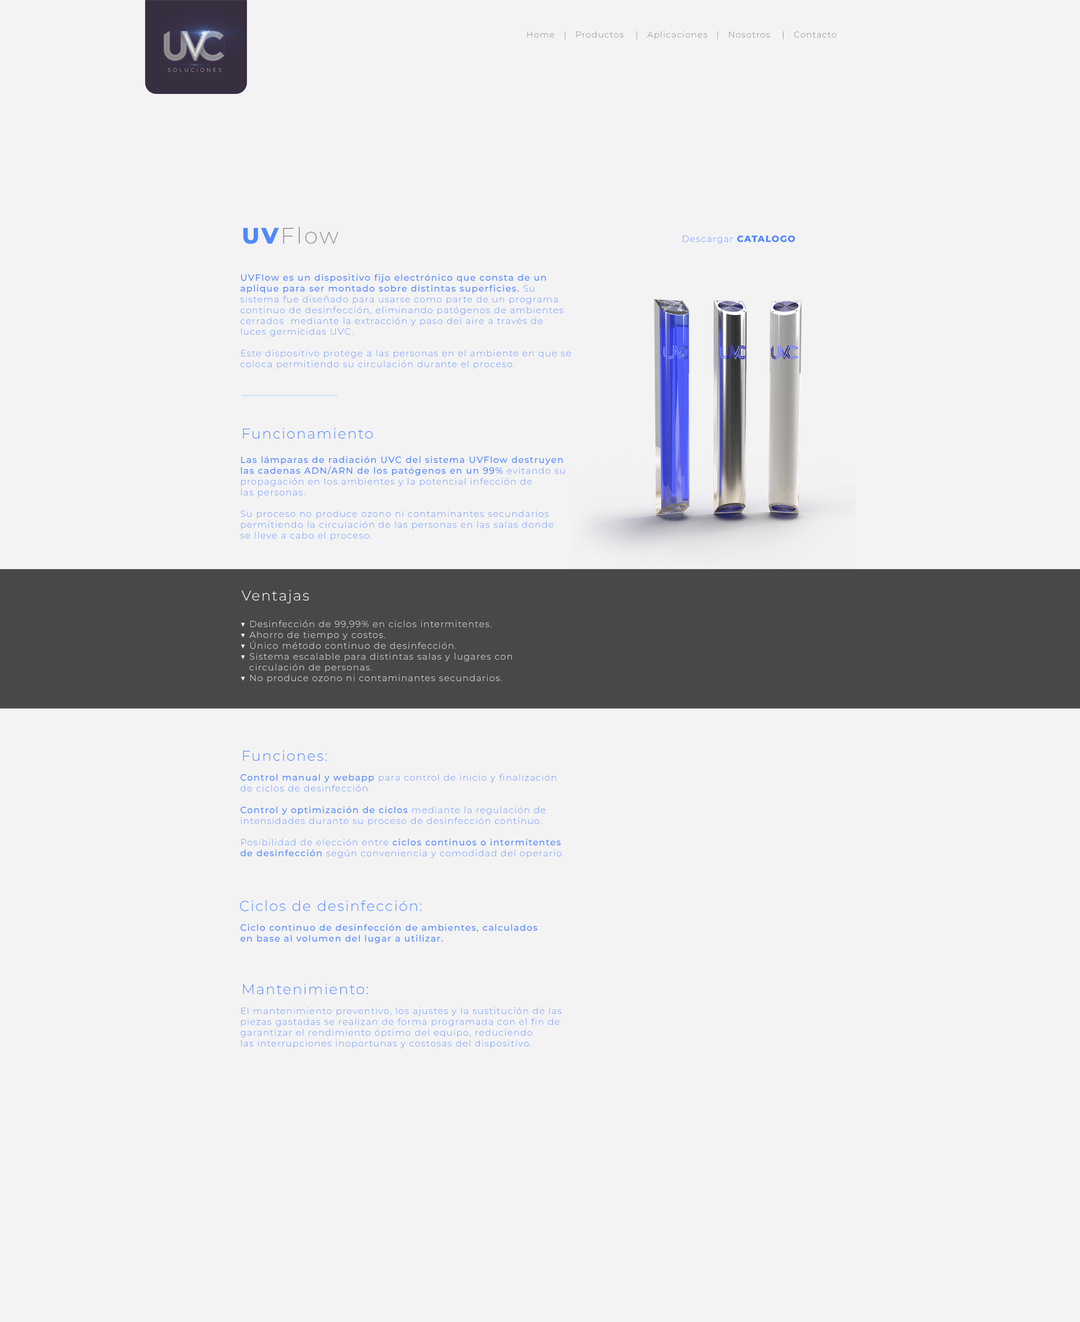
<style>
.page{position:relative;width:1080px;height:1322px;background:#f3f3f3}
.page>*{position:absolute;margin:0}
.t1{font:8.4px "Montserrat-Light";letter-spacing:0.08em;color:#7f7b7b}
.t2{font:22.5px "Montserrat-Light";letter-spacing:0.08em;color:#9c9c9d}
.t3{font:22.5px "Montserrat-ExtraBold";letter-spacing:0.08em;color:#4f87fd}
.t4{font:9px "Montserrat-Light";letter-spacing:0.08em;color:#4f87fd}
.t5{font:9px "Montserrat-ExtraBold";letter-spacing:0.08em;color:#4f87fd}
.t6{font:9px "Montserrat-Medium";letter-spacing:0.08em;color:#4f87fd}
.t7{font:14.2px "Montserrat-Light";letter-spacing:0.08em;color:#4f87fd}
.t8{font:14.2px "Montserrat-Light";letter-spacing:0.08em;color:#ffffff}
.t9{font:9px "Montserrat-Light";letter-spacing:0.08em;color:#f3f3f3}
</style>
<div class="page">
<p class="t1" style="left:527px;top:31px;width:309px;height:8px">Home   |   Productos    |   Aplicaciones   |   Nosotros    |   Contacto</p>
<p class="t2" style="left:243px;top:227px;width:96px;height:17px"><span class="t3">UV</span>Flow</p>
<p class="t4" style="left:683px;top:235px;width:112px;height:9px">Descargar <span class="t5">CATALOGO</span></p>
<p class="t4" style="left:240px;top:274px;width:331px;height:95px"><span class="t6">UVFlow es un dispositivo fijo electrónico que consta de un <br>aplique para ser montado sobre distintas superficies. </span>Su <br>sistema fue diseñado para usarse como parte de un programa <br>continuo de desinfección, eliminando patógenos de ambientes <br>cerrados  mediante la extracción y paso del aire a través de <br>luces germicidas UVC.<br><br>Este dispositivo protege a las personas en el ambiente en que se <br>coloca permitiendo su circulación durante el proceso.</p>
<p class="t7" style="left:243px;top:428px;width:130px;height:11px">Funcionamiento</p>
<p class="t4" style="left:240px;top:456px;width:325px;height:85px"><span class="t6">Las lámparas de radiación UVC del sistema UVFlow destruyen <br>las cadenas ADN/ARN de los patógenos en un 99% </span>evitando su <br>propagación en los ambientes y la potencial infección de <br>las personas.<br><br>Su proceso no produce ozono ni contaminantes secundarios <br>permitiendo la circulación de las personas en las salas donde <br>se lleve a cabo el proceso.</p>
<p class="t8" style="left:241px;top:590px;width:68px;height:14px">Ventajas</p>
<p class="t9" style="left:241px;top:620px;width:271px;height:63px">▼ Desinfección de 99,99% en ciclos intermitentes.<br>▼ Ahorro de tiempo y costos.<br>▼ Único método continuo de desinfección.<br>▼ Sistema escalable para distintas salas y lugares con <br>   circulación de personas.<br>▼ No produce ozono ni contaminantes secundarios.</p>
<p class="t7" style="left:243px;top:750px;width:84px;height:11px">Funciones:</p>
<p class="t4" style="left:240px;top:774px;width:324px;height:84px"><span class="t6">Control manual y webapp </span>para control de inicio y finalización <br>de ciclos de desinfección.<br><span class="t6"><br>Control y optimización de ciclos </span>mediante la regulación de <br>intensidades durante su proceso de desinfección continuo.<br><br>Posibilidad de elección entre <span class="t6">ciclos continuos o intermitentes <br>de desinfección </span>según conveniencia y comodidad del operario.</p>
<p class="t7" style="left:240px;top:901px;width:182px;height:11px">Ciclos de desinfección:</p>
<p class="t6" style="left:240px;top:924px;width:297px;height:20px">Ciclo continuo de desinfección de ambientes, calculados <br>en base al volumen del lugar a utilizar.</p>
<p class="t7" style="left:243px;top:984px;width:125px;height:11px">Mantenimiento:</p>
<p class="t4" style="left:240px;top:1007px;width:321px;height:42px">El mantenimiento preventivo, los ajustes y la sustitución de las <br>piezas gastadas se realizan de forma programada con el fin de <br>garantizar el rendimiento óptimo del equipo, reduciendo<br>las interrupciones inoportunas y costosas del dispositivo.</p>
</div>
